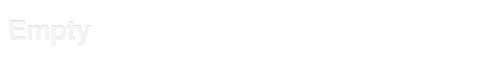
<style>
.page{position:relative;width:500px;height:63px;background:#ffffff}
.page>*{position:absolute;margin:0}
.t1{font:28px "Helvetica-Bold";letter-spacing:-0.04em;color:#ededed}
</style>
<div class="page">
<p class="t1" style="left:10px;top:19px;width:81px;height:28px;opacity:0.6">Empty</p>
</div>
